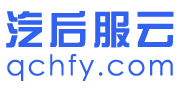
<style>
.page{position:relative;width:180px;height:90px;background:#ffffff}
.page>*{position:absolute;margin:0}
.t1{font:39.7px "ç»å¸ç»¼èºä½ç®-regular";letter-spacing:0.1em;color:#3061ef}
.t2{font:28.4px "CenturyGothic";letter-spacing:0.08em;color:#3061ef}
</style>
<div class="page">
<p class="t1" style="left:6px;top:11px;width:168px;height:37px">汽后服云</p>
<p class="t2" style="left:7px;top:54px;width:166px;height:27px">qchfy.com</p>
</div>
